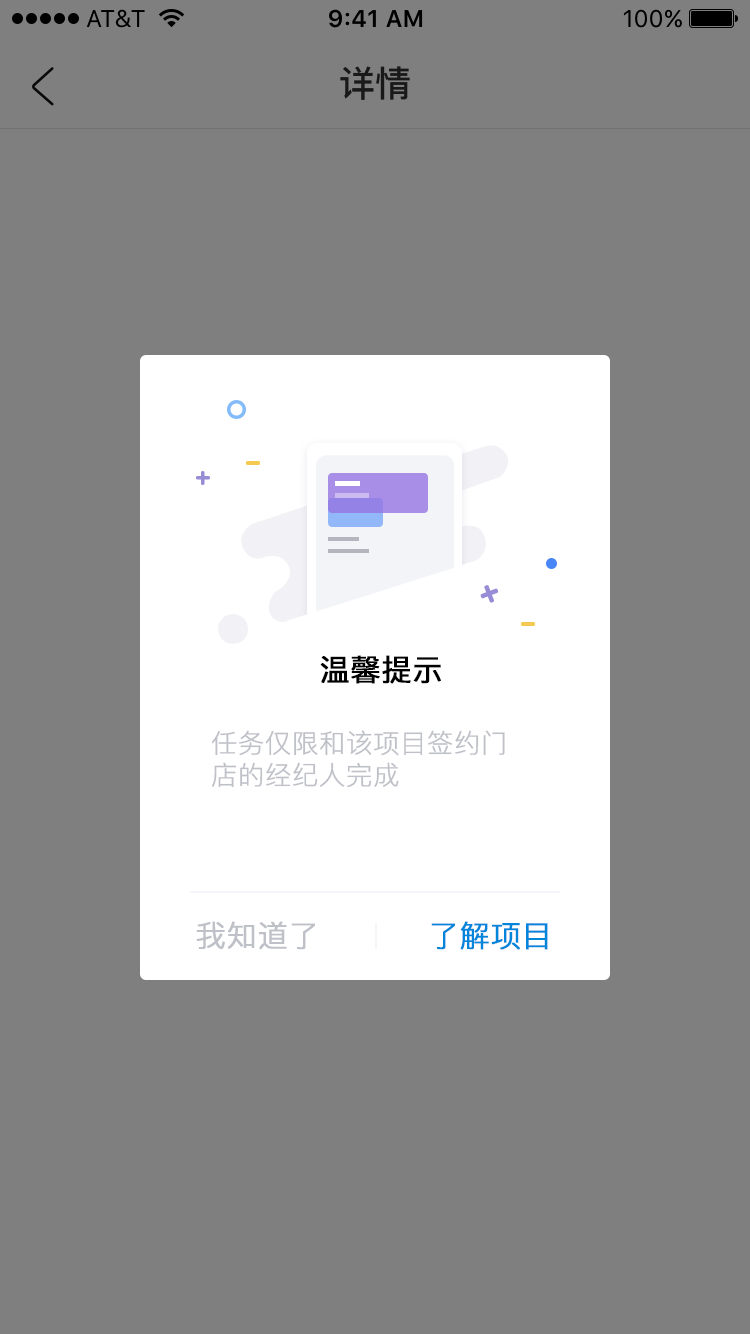
<style>
.page{position:relative;width:750px;height:1334px;background:#7f7f7f}
.page>*{position:absolute;margin:0}
.t1{font:36px "PingFang-SC-Bold";color:#191919}
.t2{font:30px "PingFang-SC-Medium";color:#000000;font-weight:bold}
.t3{font:26px/32px "PingFang-SC-Light";color:#bfc1c8;font-weight:bold}
.t4{font:30px "PingFang-SC-Regular";color:#bfc1c8;font-weight:bold}
.t5{font:30px "PingFang-SC-Regular";color:#0385db;font-weight:bold}
</style>
<div class="page">
<p class="t1" style="left:340px;top:66px;width:70px;height:34px">详情</p>
<p class="t2" style="left:320px;top:655px;width:121px;height:29px">温馨提示</p>
<p class="t3" style="left:211px;top:730px;width:294px;height:58px">任务仅限和该项目签约门<br>店的经纪人完成</p>
<p class="t4" style="left:196px;top:921px;width:119px;height:29px">我知道了</p>
<p class="t5" style="left:431px;top:921px;width:117px;height:29px">了解项目</p>
</div>
